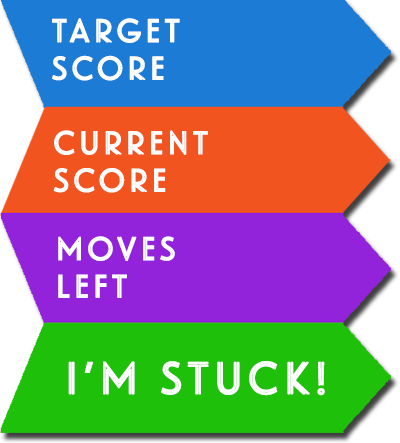
<style>
.page{position:relative;width:400px;height:443px}
.page>*{position:absolute;margin:0}
.t1{font:31.3px "Landmark-Inline";letter-spacing:0.1em;color:#ffffff;font-weight:bold}
.t2{font:43.4px "Landmark-Inline";letter-spacing:0.1em;color:#ffffff;font-weight:bold}
</style>
<div class="page">
<p class="t1" style="left:52px;top:18px;width:128px;height:63px;text-align:right">target<br>score</p>
<p class="t1" style="left:53px;top:130px;width:155px;height:63px;text-align:right">CURRENT<br>score</p>
<p class="t1" style="left:58px;top:236px;width:117px;height:62px;text-align:right">MOVES<br>LEFT</p>
<p class="t2" style="left:68px;top:361px;width:257px;height:35px">i’m stuck!</p>
</div>
